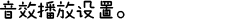
<style>
.page{position:relative;width:248px;height:19px;background:#ffffff}
.page>*{position:absolute;margin:0}
.t1{font:22px "¢è?";color:#000000}
</style>
<div class="page">
<p class="t1" style="left:0px;top:0px;width:125px;height:19px">音效播放设置。</p>
</div>
